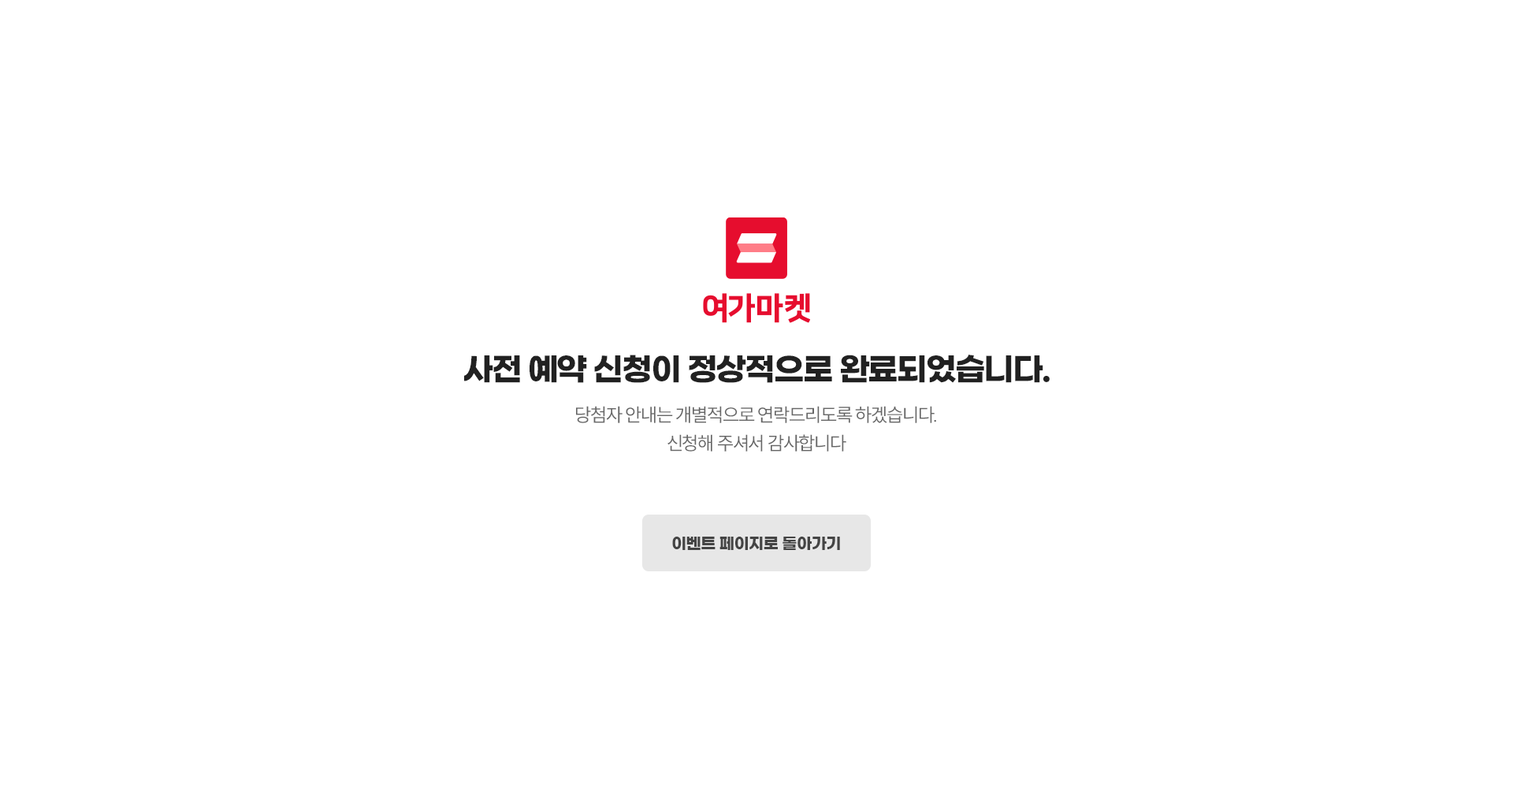
<style>
.page{position:relative;width:1513px;height:788px;background:#ffffff}
.page>*{position:absolute;margin:0}
.t1{font:31.5px "GmarketSansTTFBold";letter-spacing:-0.05em;color:#212121;text-transform:uppercase}
.t2{font:18.9px/28.4px "SUIT-Regular";letter-spacing:-0.05em;color:#666666;text-transform:uppercase}
.t3{font:15.8px "GmarketSansTTFBold";letter-spacing:-0.03em;color:#444444}
</style>
<div class="page">
<p class="t1" style="left:464px;top:355px;width:586px;height:28px">사전 예약 신청이 정상적으로 완료되었습니다.</p>
<p class="t2" style="left:576px;top:406px;width:360px;height:46px;text-align:center">당첨자 안내는 개별적으로 연락드리도록 하겠습니다.<br>신청해 주셔서 감사합니다</p>
<p class="t3" style="left:672px;top:537px;width:168px;height:13px">이벤트 페이지로 돌아가기</p>
</div>
